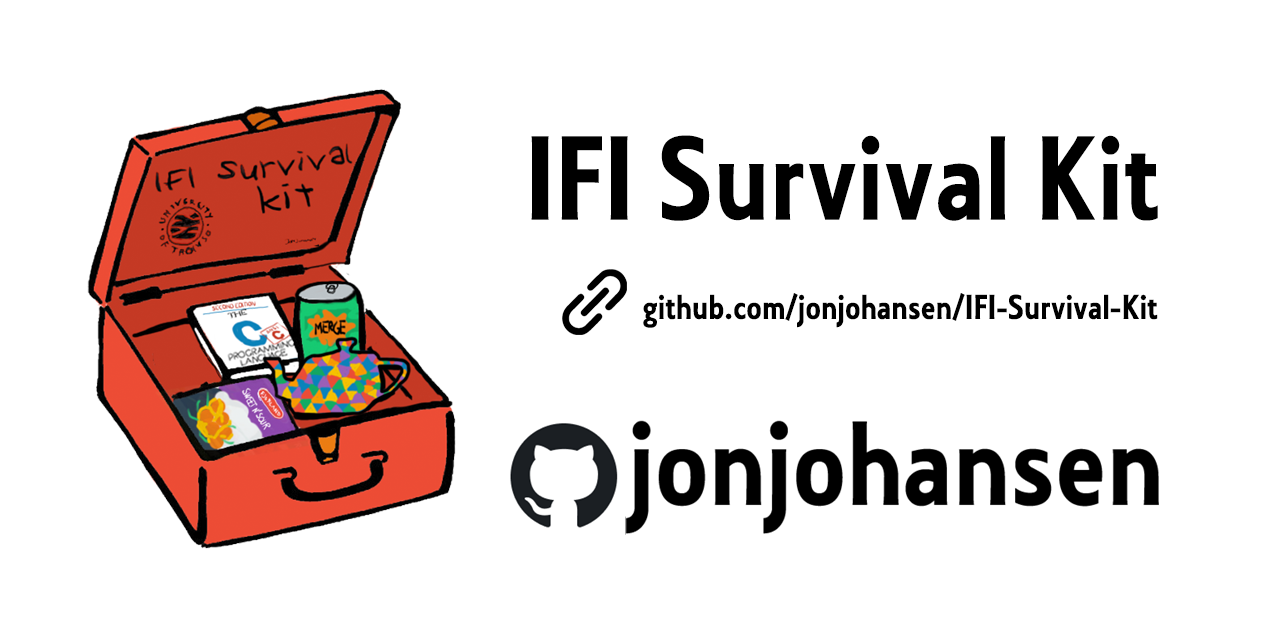
<style>
.page{position:relative;width:1280px;height:640px;background:#ffffff}
.page>*{position:absolute;margin:0}
.t1{font:124.7px "Collegiate";letter-spacing:0.01em;color:#000000}
.t2{font:36px "Collegiate";letter-spacing:0.01em;color:#000000}
</style>
<div class="page">
<p class="t1" style="left:531px;top:135px;width:627px;height:86px">IFI Survival Kit</p>
<p class="t2" style="left:643px;top:293px;width:515px;height:35px">github.com/jonjohansen/IFI-Survival-Kit</p>
</div>
